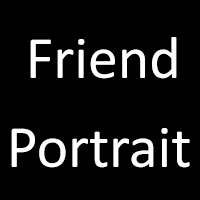
<style>
.page{position:relative;width:200px;height:200px;background:#000000}
.page>*{position:absolute;margin:0}
.t1{font:60px "Calibri";color:#ffffff}
</style>
<div class="page">
<p class="t1" style="left:30px;top:37px;width:147px;height:42px">Friend</p>
<p class="t1" style="left:11px;top:128px;width:179px;height:40px">Portrait</p>
</div>
